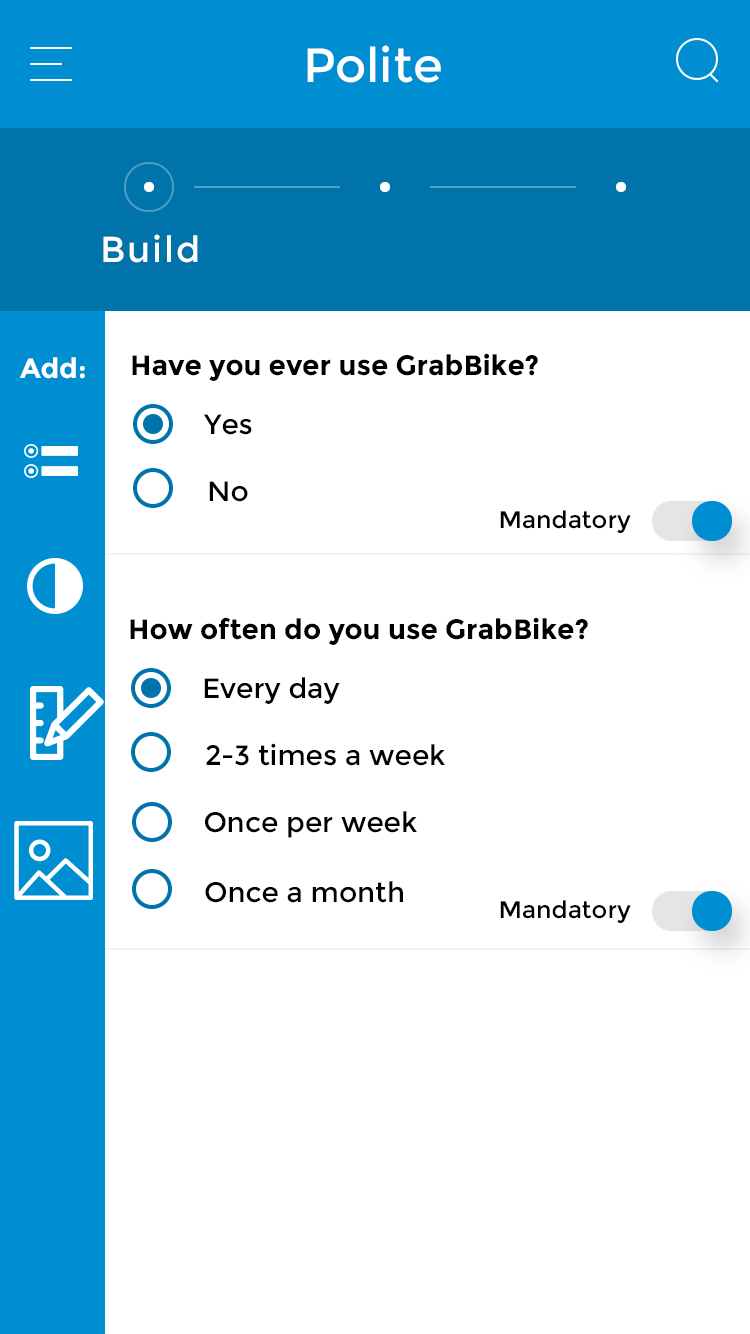
<style>
.page{position:relative;width:750px;height:1334px;background:#ffffff}
.page>*{position:absolute;margin:0}
.t1{font:48px "Montserrat-Regular";color:#ffffff}
.t2{font:36px "Montserrat-Regular";letter-spacing:0.05em;color:#ffffff}
.t3{font:28px "Montserrat-Bold";color:#000000}
.t4{font:28px "Montserrat-Bold";color:#ffffff}
.t5{font:28px "Montserrat-Regular";color:#000000}
.t6{font:24px "Montserrat-Regular";color:#000000}
</style>
<div class="page">
<p class="t1" style="left:307px;top:45px;width:134px;height:38px">Polite</p>
<p class="t2" style="left:103px;top:234px;width:95px;height:29px">Build</p>
<p class="t3" style="left:132px;top:353px;width:406px;height:28px">Have you ever use GrabBike?</p>
<p class="t4" style="left:19px;top:357px;width:66px;height:22px">Add:</p>
<p class="t5" style="left:203px;top:414px;width:49px;height:21px">Yes</p>
<p class="t5" style="left:209px;top:481px;width:39px;height:21px">No</p>
<p class="t6" style="left:500px;top:510px;width:131px;height:23px">Mandatory</p>
<p class="t3" style="left:130px;top:617px;width:458px;height:28px">How often do you use GrabBike?</p>
<p class="t5" style="left:204px;top:677px;width:136px;height:27px">Every day</p>
<p class="t5" style="left:206px;top:743px;width:239px;height:23px">2-3 times a week</p>
<p class="t5" style="left:205px;top:811px;width:212px;height:27px">Once per week</p>
<p class="t5" style="left:205px;top:881px;width:198px;height:22px">Once a month</p>
<p class="t6" style="left:500px;top:900px;width:131px;height:23px">Mandatory</p>
</div>
